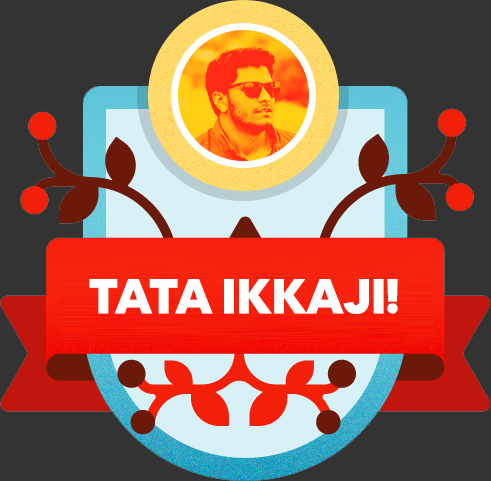
<style>
.page{position:relative;width:491px;height:481px;background:#333333}
.page>*{position:absolute;margin:0}
.t1{font:48px "AirbnbCerealApp-Black";letter-spacing:-0.02em;color:#ffffff;text-transform:uppercase}
</style>
<div class="page">
<p class="t1" style="left:89px;top:279px;width:309px;height:35px">tata ikkaji!</p>
</div>
